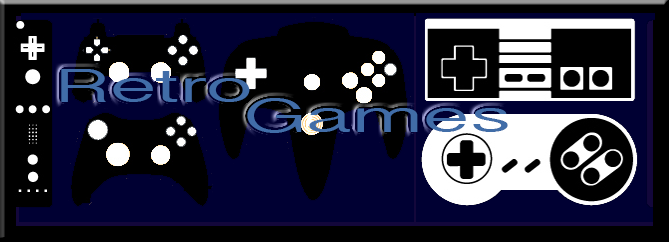
<style>
.page{position:relative;width:669px;height:242px;background:#000000}
.page>*{position:absolute;margin:0}
.t1{font:47.8px/29.9px "MalayalamSangamMN";color:#416da8;scale:1.85 1}
</style>
<div class="page">
<p class="t1" style="left:61px;top:69px;width:447px;height:64px">Retro <br>       Games</p>
</div>
